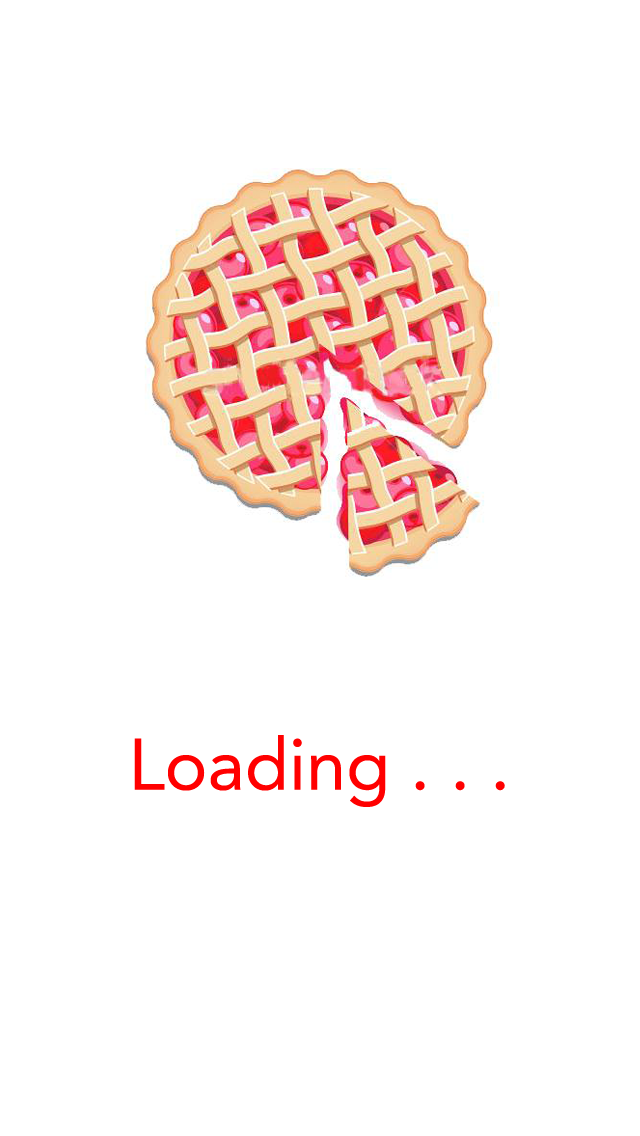
<style>
.page{position:relative;width:640px;height:1136px;background:#ffffff}
.page>*{position:absolute;margin:0}
.t1{font:72px "Avenir-Roman";color:#ff0000}
</style>
<div class="page">
<p class="t1" style="left:134px;top:735px;width:371px;height:72px">Loading . . .</p>
</div>
